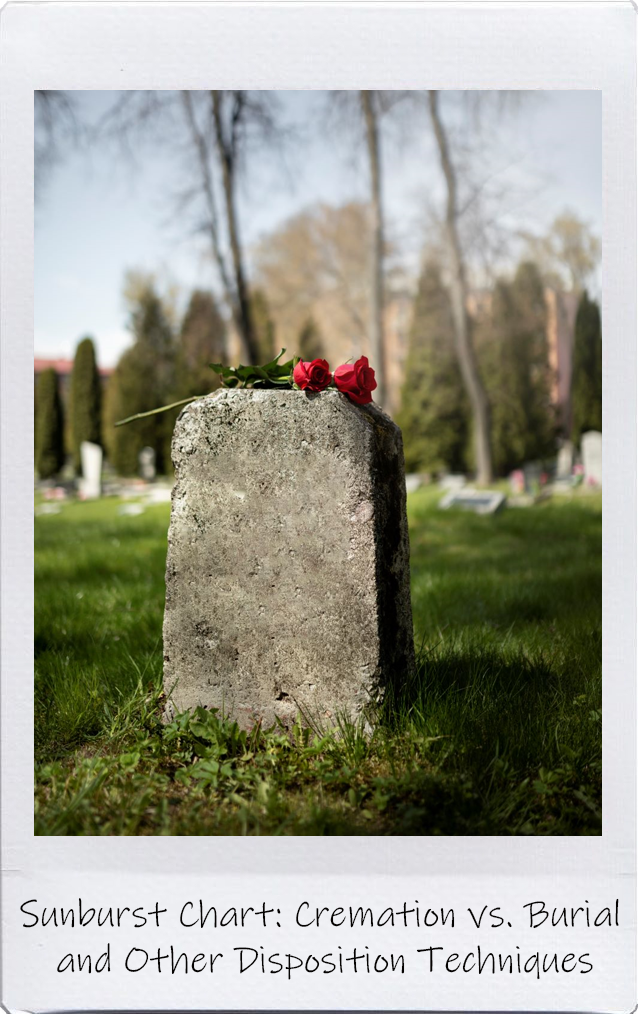
<style>
.page{position:relative;width:638px;height:1014px}
.page>*{position:absolute;margin:0}
.t1{font:38px "InkFree";color:#050302}
</style>
<div class="page">
<p class="t1" style="left:20px;top:898px;width:599px;height:82px;text-align:center">Sunburst Chart: Cremation vs. Burial <br>and Other Disposition Techniques</p>
</div>
